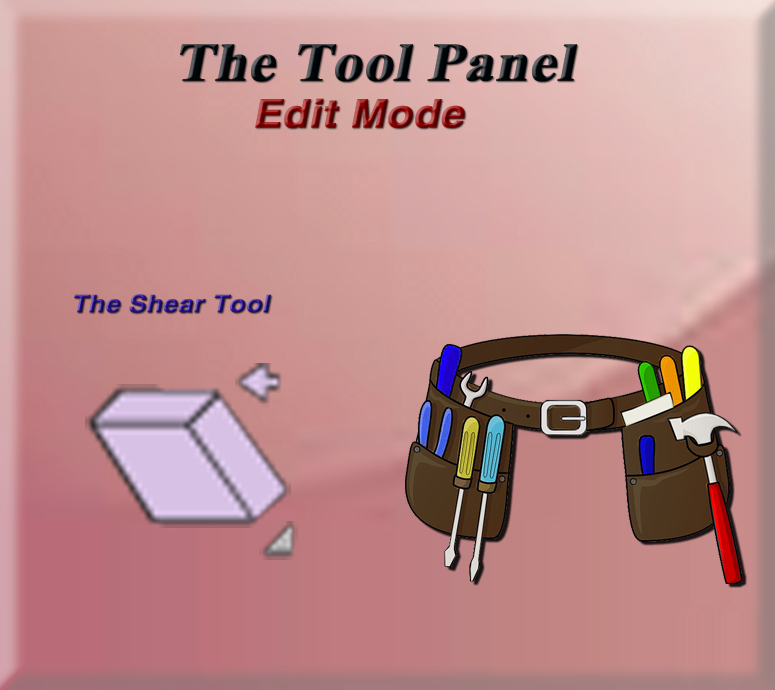
<style>
.page{position:relative;width:775px;height:690px}
.page>*{position:absolute;margin:0}
.t1{font:53.9px "TimesNewRomanPS-BoldMT";color:#000609;font-weight:bold;font-style:italic;scale:1.08 1}
.t2{font:39.1px "HelveticaLTStd-Bold";font-weight:bold;font-style:italic;scale:1.08 1}
.t3{font:53.9px "TimesNewRomanPS-BoldMT";font-weight:bold;font-style:italic;scale:1.08 1}
.t4{font:24.2px "HelveticaLTStd-Bold";font-weight:bold;font-style:italic;scale:1.08 1}
</style>
<div class="page">
<p class="t1" style="left:180px;top:44px;width:397px;height:38px">The Tool Panel</p>
<p class="t2" style="left:255px;top:98px;width:210px;height:30px"><span class="t3"> </span>Edit Mode</p>
<p class="t4" style="left:74px;top:294px;width:197px;height:19px">The Shear Tool</p>
</div>
